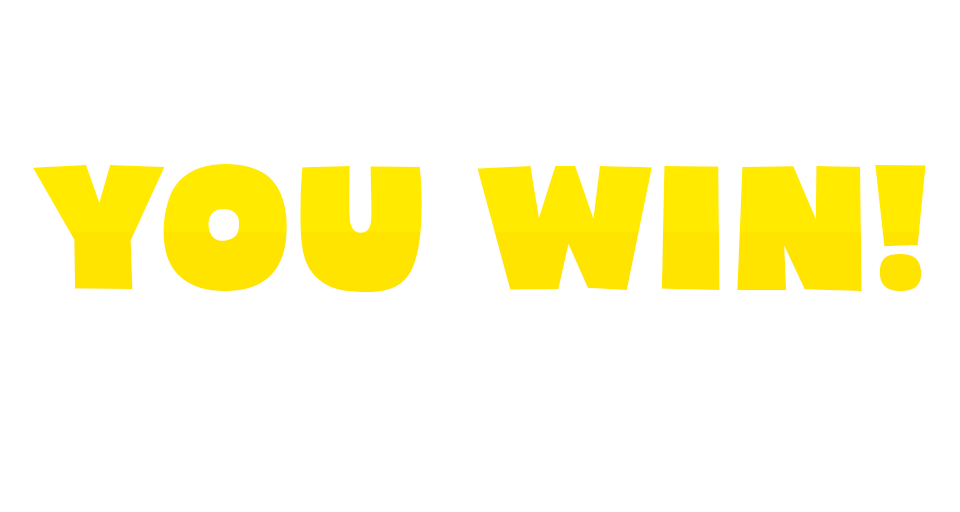
<style>
.page{position:relative;width:960px;height:512px;background:#ffffff}
.page>*{position:absolute;margin:0}
.t1{font:166.7px "Bumpo";color:#ffea00}
</style>
<div class="page">
<p class="t1" style="left:33px;top:164px;width:893px;height:129px">YOU WIN!</p>
</div>
